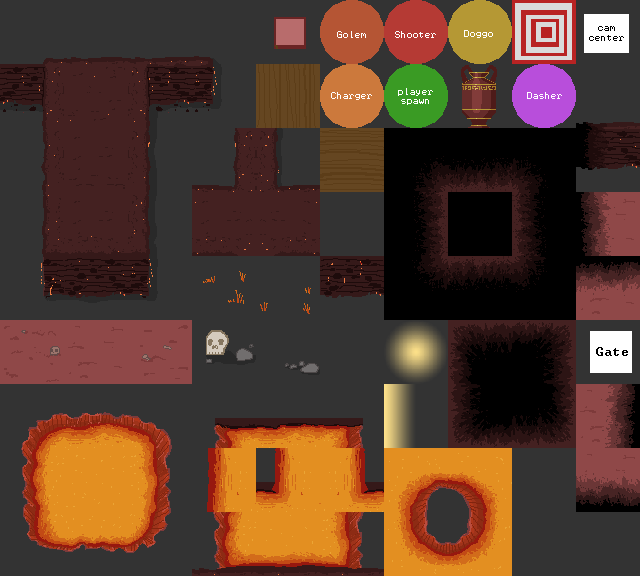
<style>
.page{position:relative;width:640px;height:576px;background:#333333}
.page>*{position:absolute;margin:0}
.t1{font:8px "Terminal";color:#ffffff}
.t2{font:8px "Terminal";color:#000000}
.t3{font:13px "Terminal";letter-spacing:0.04em;color:#000000}
</style>
<div class="page">
<p class="t1" style="left:464px;top:30px;width:29px;height:8px">Doggo</p>
<p class="t2" style="left:589px;top:26px;width:35px;height:15px;text-align:center">cam<br>center</p>
<p class="t1" style="left:337px;top:31px;width:29px;height:7px">Golem</p>
<p class="t1" style="left:395px;top:31px;width:41px;height:7px">Shooter</p>
<p class="t1" style="left:398px;top:88px;width:35px;height:17px;text-align:center">player<br>spawn</p>
<p class="t1" style="left:331px;top:92px;width:41px;height:8px">Charger</p>
<p class="t1" style="left:527px;top:92px;width:35px;height:7px">Dasher</p>
<p class="t3" style="left:596px;top:347px;width:32px;height:9px">Gate</p>
</div>
